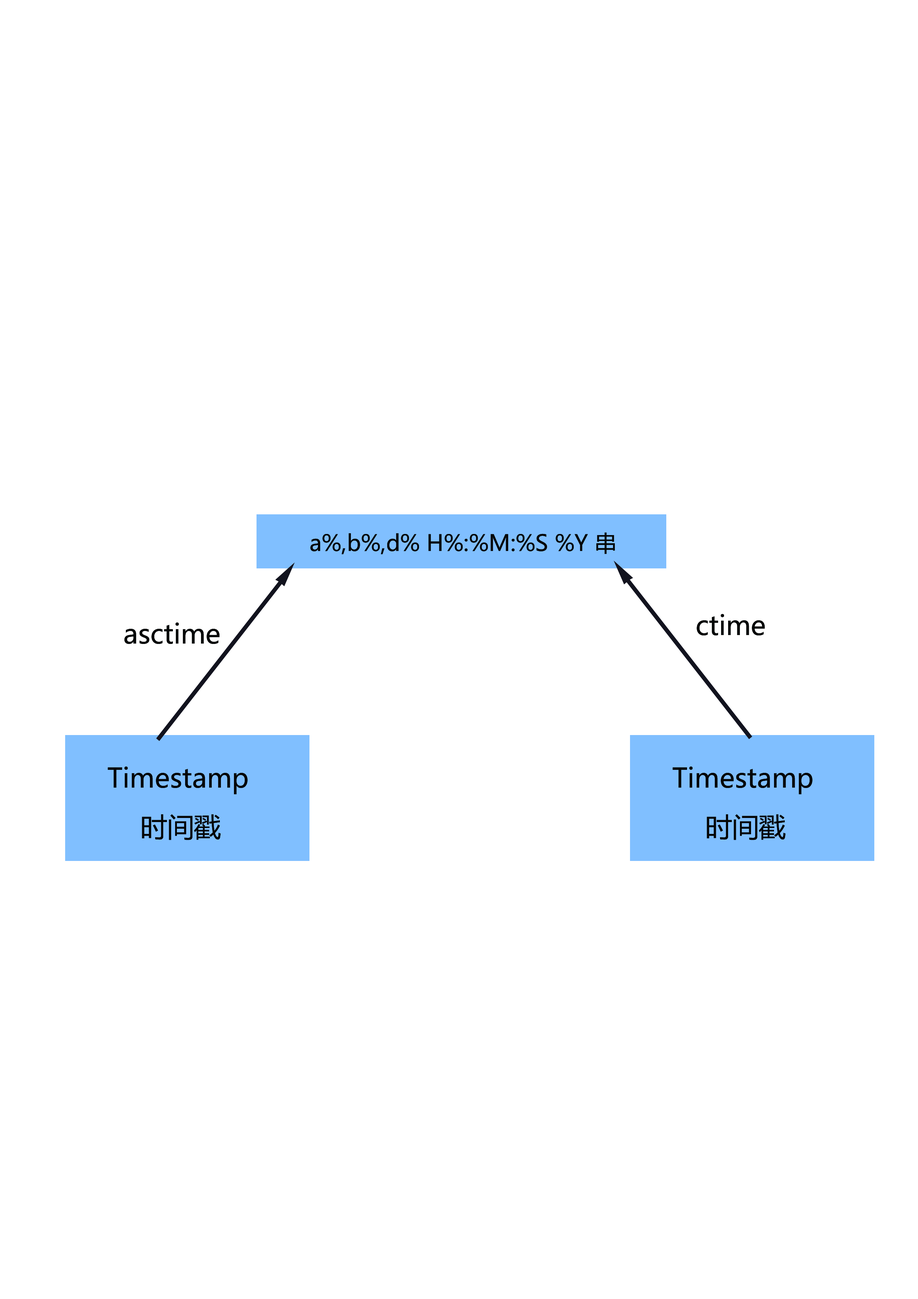
<style>
.page{position:relative;width:918px;height:1299px;background:#ffffff}
.page>*{position:absolute;margin:0}
.t1{font:22.2px "MicrosoftYaHei";color:#040606}
.t2{font:26.7px "MicrosoftYaHei";color:#040606}
</style>
<div class="page">
<p class="t1" style="left:310px;top:532px;width:305px;height:22px">a%,b%,d% H%:%M:%S %Y 串</p>
<p class="t2" style="left:697px;top:614px;width:68px;height:21px">ctime</p>
<p class="t2" style="left:124px;top:622px;width:96px;height:22px">asctime</p>
<p class="t2" style="left:108px;top:766px;width:140px;height:28px">Timestamp</p>
<p class="t2" style="left:673px;top:766px;width:140px;height:28px">Timestamp</p>
<p class="t2" style="left:142px;top:814px;width:79px;height:26px">时间戳</p>
<p class="t2" style="left:707px;top:814px;width:79px;height:26px">时间戳</p>
</div>
